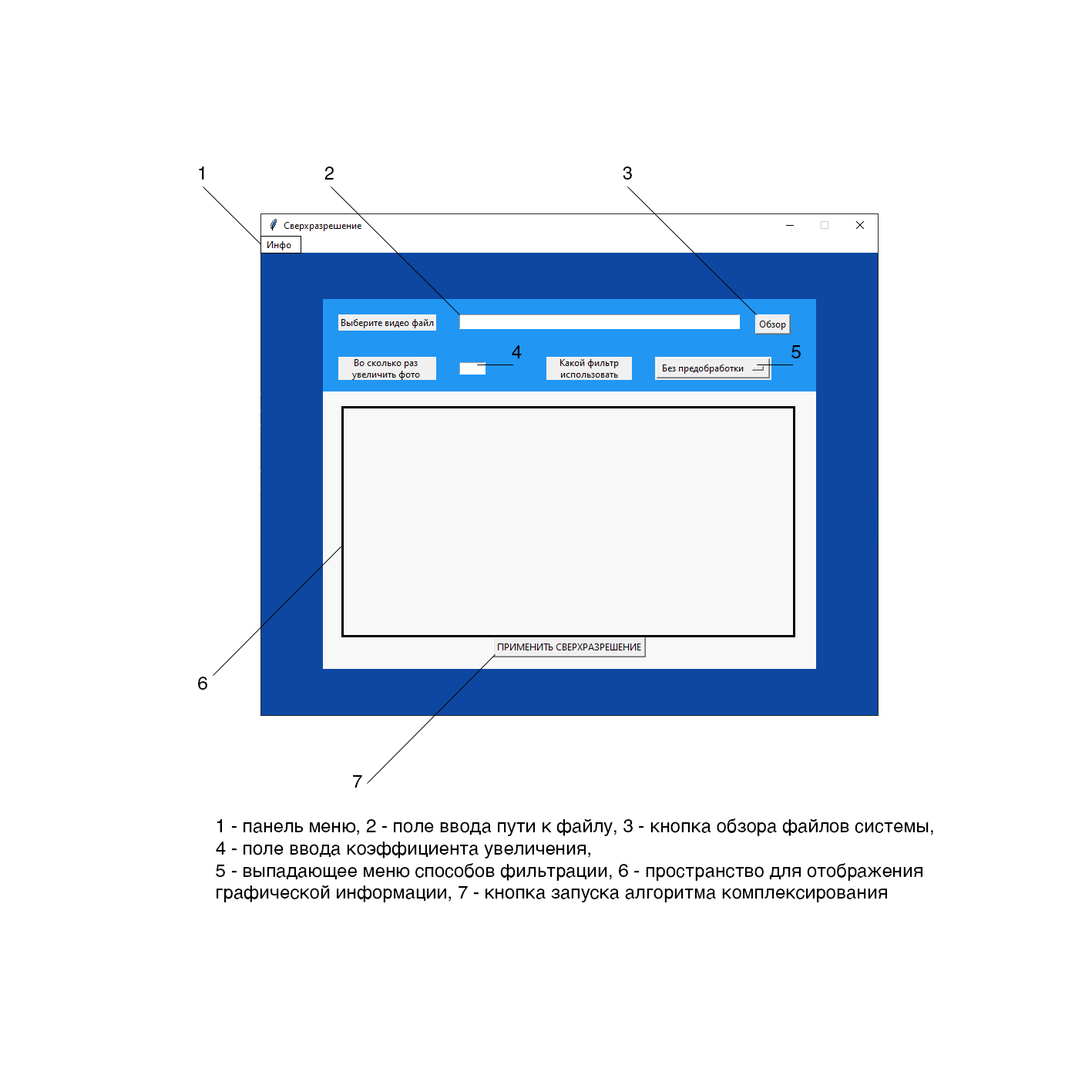
<style>
.page{position:relative;width:1092px;height:1092px;background:#ffffff}
.page>*{position:absolute;margin:0}
.t1{font:18.5px "Helvetica-Regular";color:#000000}
.t2{font:18.4px "Helvetica-Regular";color:#000000}
.t3{font:18.6px "Helvetica-Regular";color:#000000}
</style>
<div class="page">
<p class="t1" style="left:199px;top:166px;width:5px;height:14px">1</p>
<p class="t2" style="left:324px;top:166px;width:10px;height:14px">2</p>
<p class="t2" style="left:623px;top:166px;width:9px;height:14px">3</p>
<p class="t1" style="left:512px;top:345px;width:10px;height:13px">4</p>
<p class="t3" style="left:791px;top:345px;width:10px;height:14px">5</p>
<p class="t1" style="left:198px;top:677px;width:9px;height:13px">6</p>
<p class="t1" style="left:353px;top:774px;width:9px;height:14px">7</p>
<p class="t1" style="left:216px;top:818px;width:717px;height:84px">1 - панель меню, 2 - поле ввода пути к файлу, 3 - кнопка обзора файлов системы, 4 - поле ввода коэффициента увеличения, <br>5 - выпадающее меню способов фильтрации, 6 - пространство для отображения графической информации, 7 - кнопка запуска алгоритма комплексирования</p>
</div>
